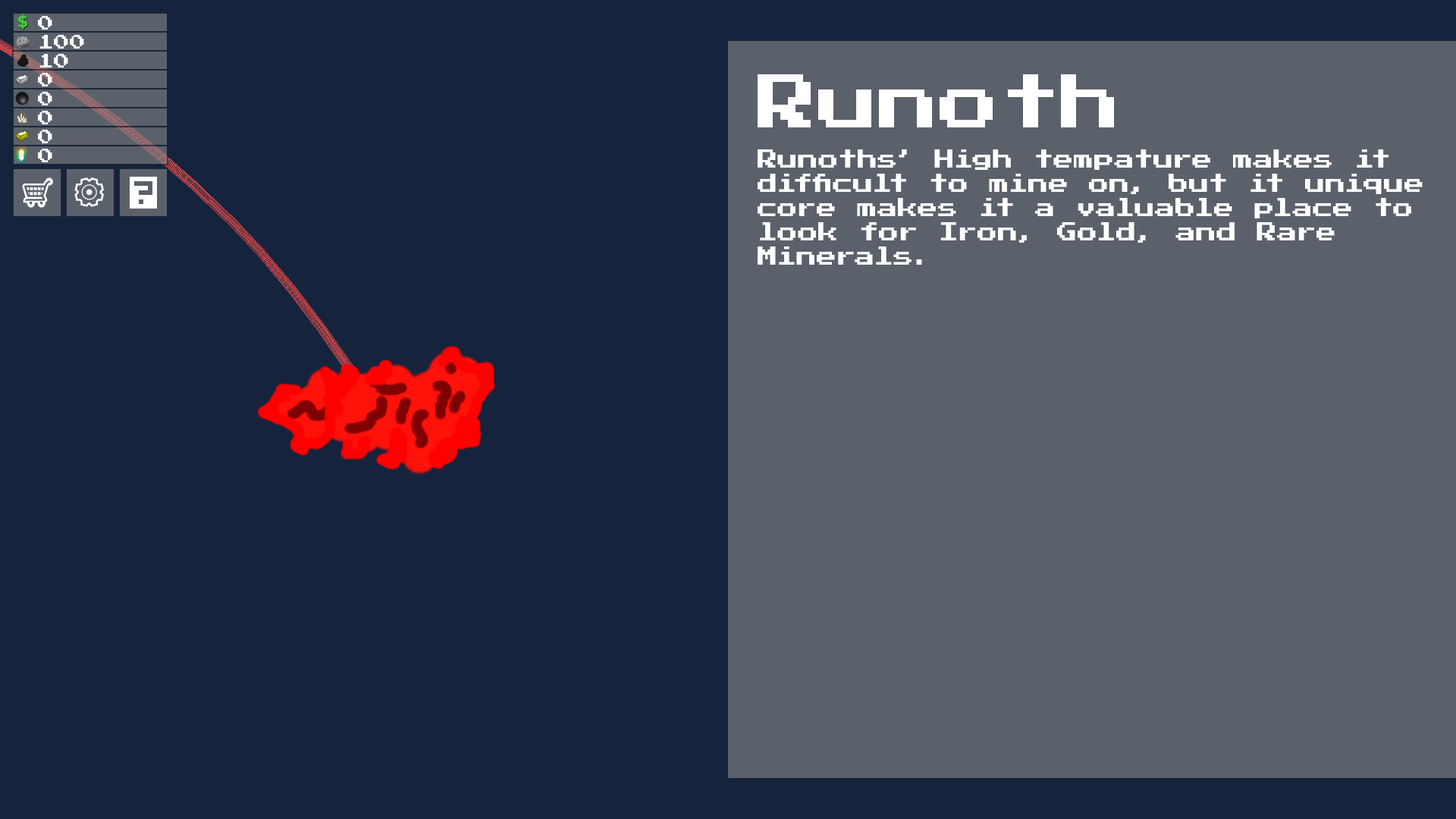
<style>
.page{position:relative;width:1456px;height:819px;background:#15243c}
.page>*{position:absolute;margin:0}
.t1{font:60.7px "PressStart2P-Regular";color:#ffffff}
.t2{font:20.2px "PressStart2P-Regular";color:#ffffff}
</style>
<div class="page">
<p class="t1" style="left:758px;top:74px;width:356px;height:53px">Runoth</p>
<p class="t2" style="left:758px;top:149px;width:665px;height:116px">Runoths’ High tempature makes it<br>difficult to mine on, but it unique<br>core makes it a valuable place to<br>look for Iron, Gold, and Rare<br>Minerals.</p>
</div>
